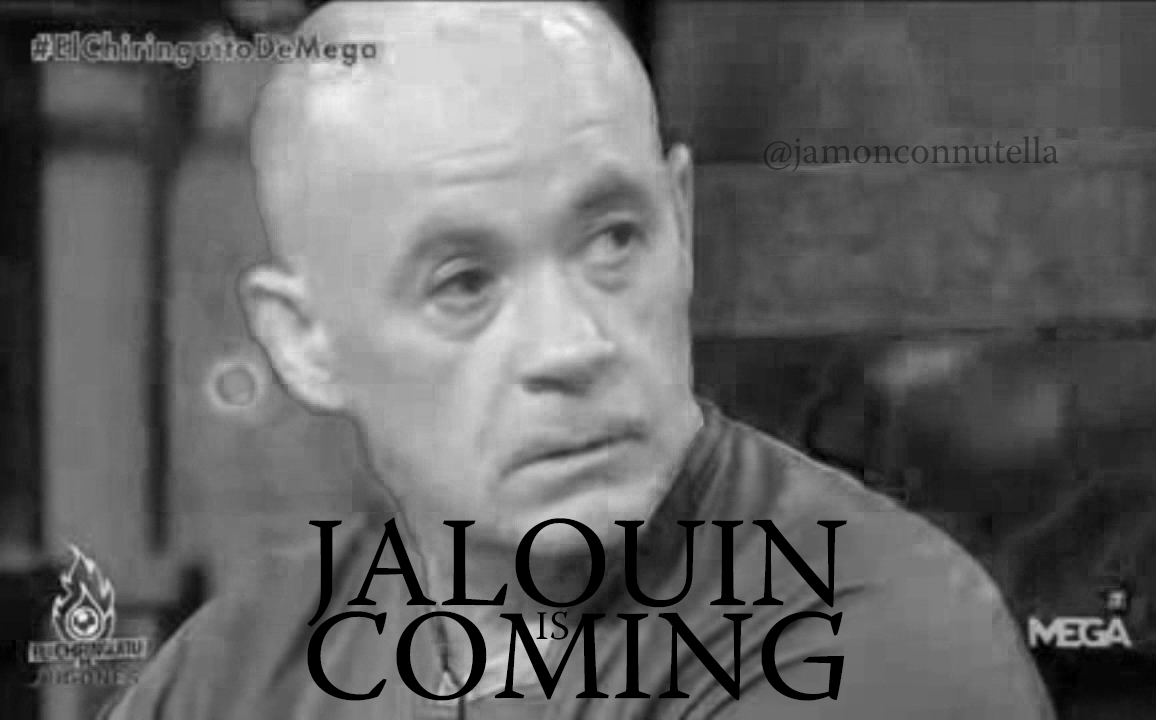
<style>
.page{position:relative;width:1156px;height:720px}
.page>*{position:absolute;margin:0}
.t1{font:38.1px "WarnockPro-Regular";color:#313131}
.t2{font:128.4px "WarnockPro-Regular";color:#000000}
.t3{font:40.8px "WarnockPro-Regular";color:#000000}
</style>
<div class="page">
<p class="t1" style="left:763px;top:136px;width:296px;height:36px">@jamonconnutella</p>
<p class="t2" style="left:307px;top:517px;width:540px;height:184px;text-align:center">JALOUIN<br>COMING</p>
<p class="t3" style="left:536px;top:611px;width:33px;height:29px">IS</p>
</div>
